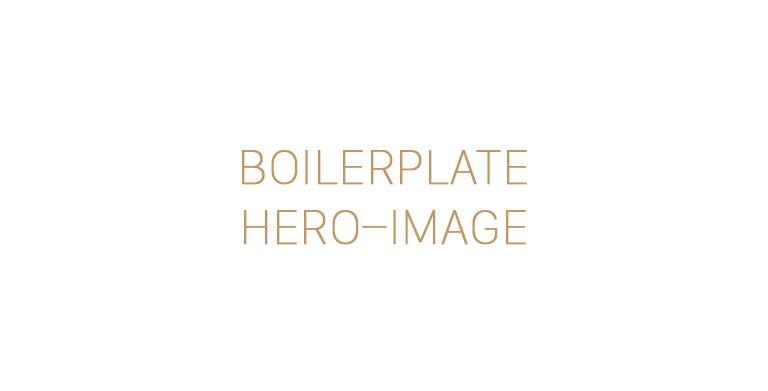
<style>
.page{position:relative;width:768px;height:391px;background:#ffffff}
.page>*{position:absolute;margin:0}
.t1{font:50px "SFCompactDisplay-Ultralight";color:#c39761;text-transform:uppercase;font-weight:bold}
</style>
<div class="page">
<p class="t1" style="left:242px;top:150px;width:285px;height:95px;text-align:center">Boilerplate<br>hero–image</p>
</div>
